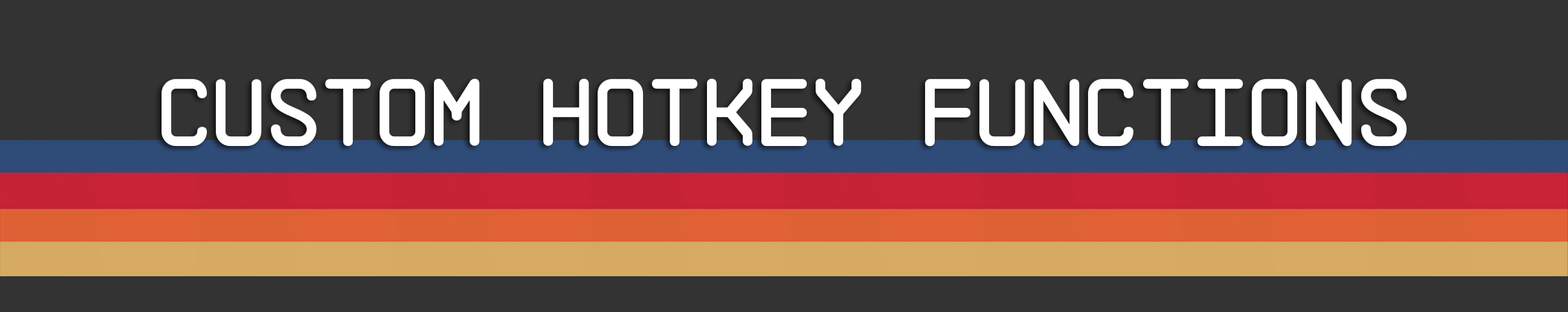
<style>
.page{position:relative;width:1568px;height:312px;background:#333333}
.page>*{position:absolute;margin:0}
.t1{font:95.3px "NB-Architekt";color:#ffffff}
</style>
<div class="page">
<p class="t1" style="left:161px;top:78px;width:1246px;height:69px">Custom Hotkey Functions</p>
</div>
